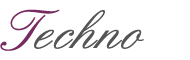
<style>
.page{position:relative;width:190px;height:60px;background:#ffffff}
.page>*{position:absolute;margin:0}
.t1{font:60px "English";color:#782b60}
.t2{font:60px "English";color:#555555}
</style>
<div class="page">
<p class="t1" style="left:0px;top:9px;width:60px;height:42px">T</p>
<p class="t2" style="left:34px;top:10px;width:110px;height:39px">echno</p>
</div>
